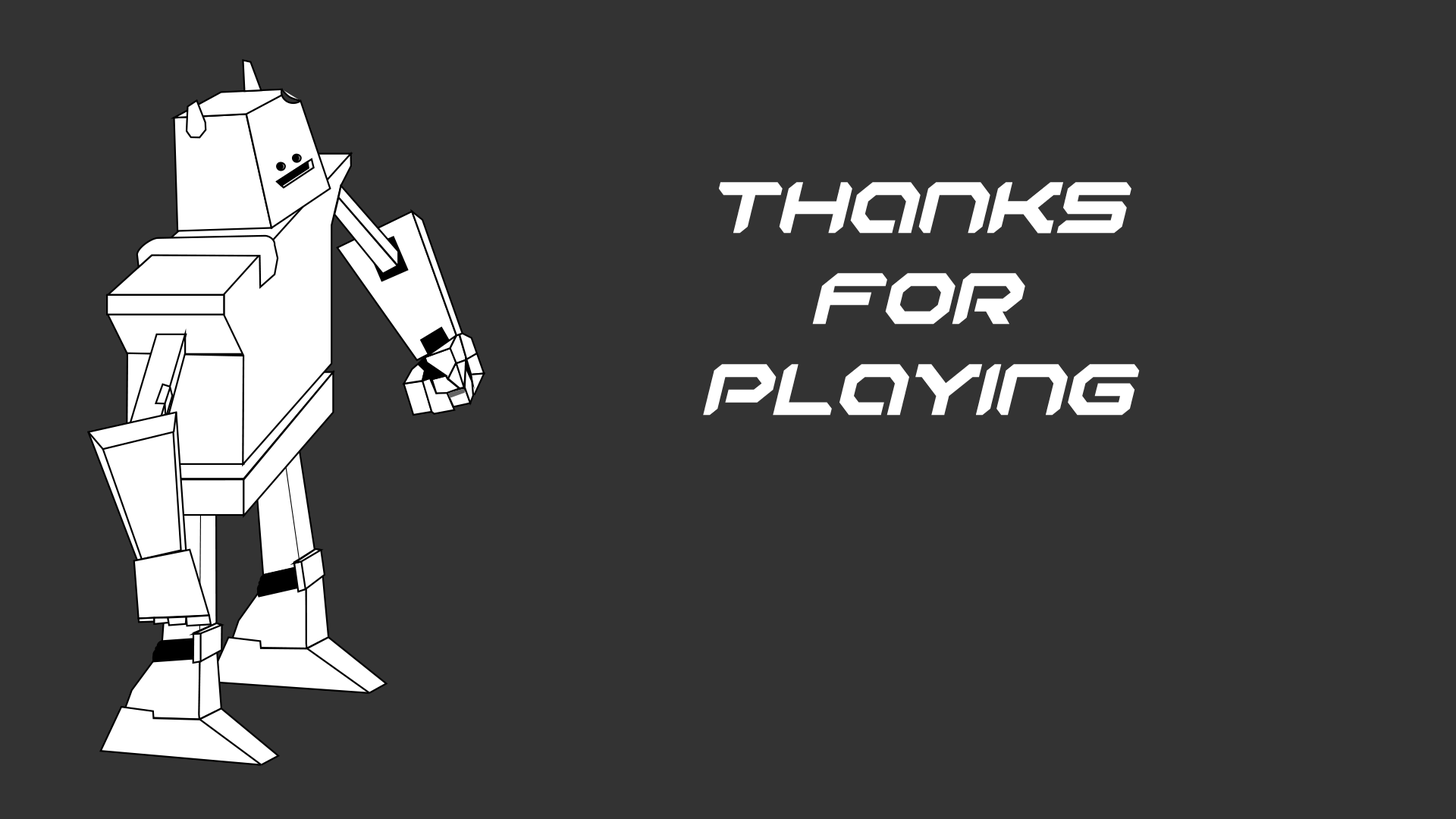
<style>
.page{position:relative;width:1456px;height:819px;background:#333333}
.page>*{position:absolute;margin:0}
.t1{font:75.8px "RobotaurItalic";color:#ffffff}
</style>
<div class="page">
<p class="t1" style="left:703px;top:182px;width:437px;height:234px;text-align:center">Thanks <br>for <br>playing</p>
</div>
